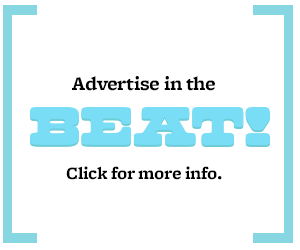
<style>
.page{position:relative;width:300px;height:250px;background:#ffffff}
.page>*{position:absolute;margin:0}
.t1{font:20px "FreightMicro-Bold";letter-spacing:-0.02em;color:#000000}
.t2{font:18px "FreightMicro-Bold";letter-spacing:-0.02em;color:#000000}
</style>
<div class="page">
<p class="t1" style="left:72px;top:76px;width:143px;height:15px">Advertise in the</p>
<p class="t2" style="left:66px;top:166px;width:156px;height:14px">Click for more info.</p>
</div>
